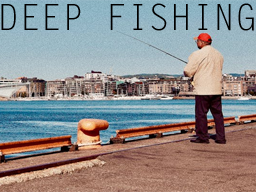
<style>
.page{position:relative;width:256px;height:192px}
.page>*{position:absolute;margin:0}
.t1{font:36px "LetterGothicStd";color:#000000}
</style>
<div class="page">
<p class="t1" style="left:1px;top:3px;width:253px;height:28px">DEEP FISHING</p>
</div>
